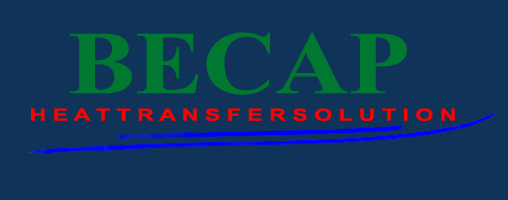
<style>
.page{position:relative;width:508px;height:200px;background:#103359}
.page>*{position:absolute;margin:0}
.t1{font:89.6px "TimesNewRomanPS-BoldMT";color:#007831;scale:1.13 1}
.t2{font:16.8px "Arial-BoldMT";color:#ff0200;scale:1.38 1}
</style>
<div class="page">
<p class="t1" style="left:70px;top:32px;width:337px;height:63px">BECAP</p>
<p class="t2" style="left:31px;top:108px;width:424px;height:13px">H E A T T R A N S F E R S O L U T I O N</p>
</div>
